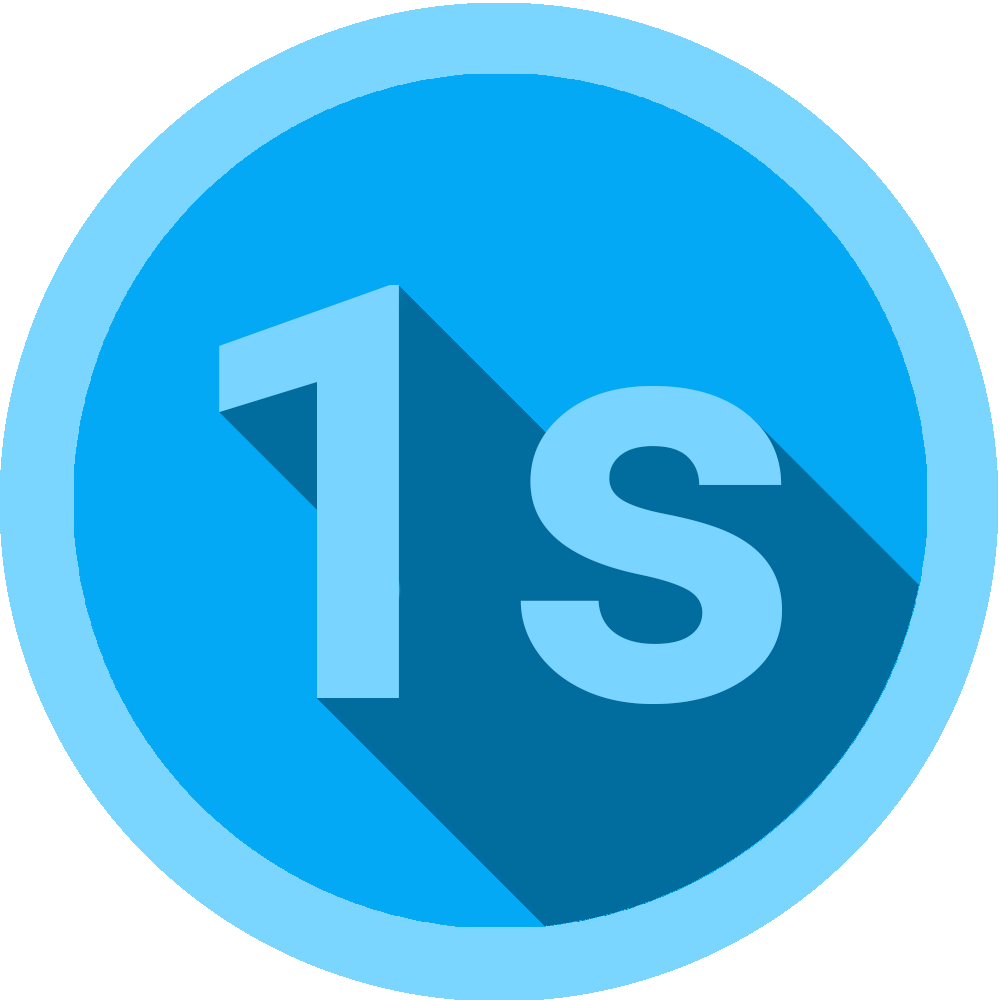
<style>
.page{position:relative;width:1000px;height:1000px;background:#03a9f4}
.page>*{position:absolute;margin:0}
.t1{font:580px "Roboto-Bold";color:#79d5ff}
</style>
<div class="page">
<p class="t1" style="left:219px;top:285px;width:563px;height:419px">1s</p>
</div>
